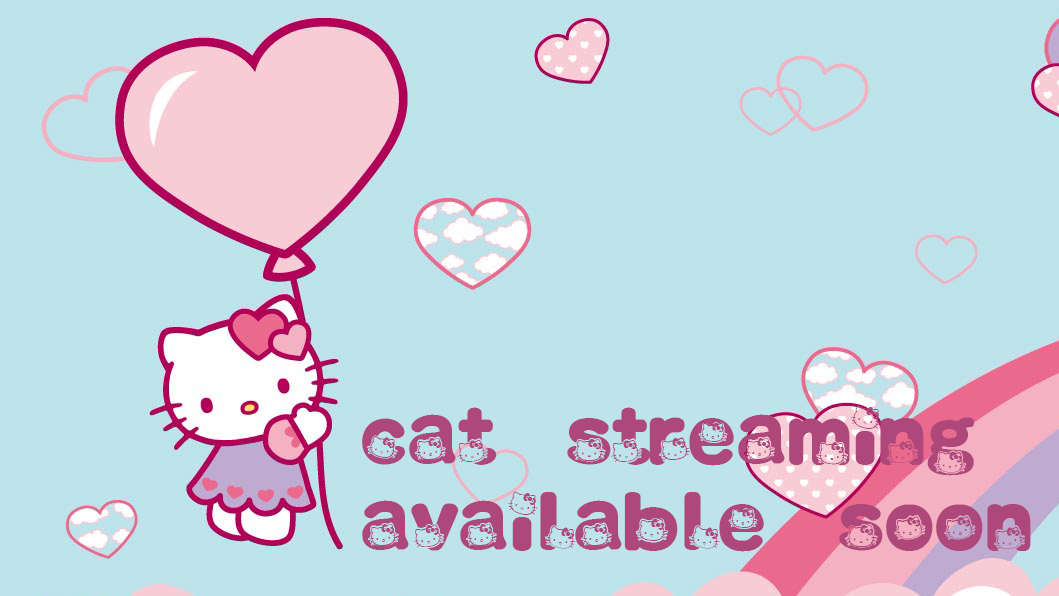
<style>
.page{position:relative;width:1059px;height:596px;background:#bde4eb}
.page>*{position:absolute;margin:0}
.t1{font:72px "HELLO-KITTY-FONT";color:#af487a}
</style>
<div class="page">
<p class="t1" style="left:362px;top:405px;width:669px;height:147px">cat streaming available soon</p>
</div>
